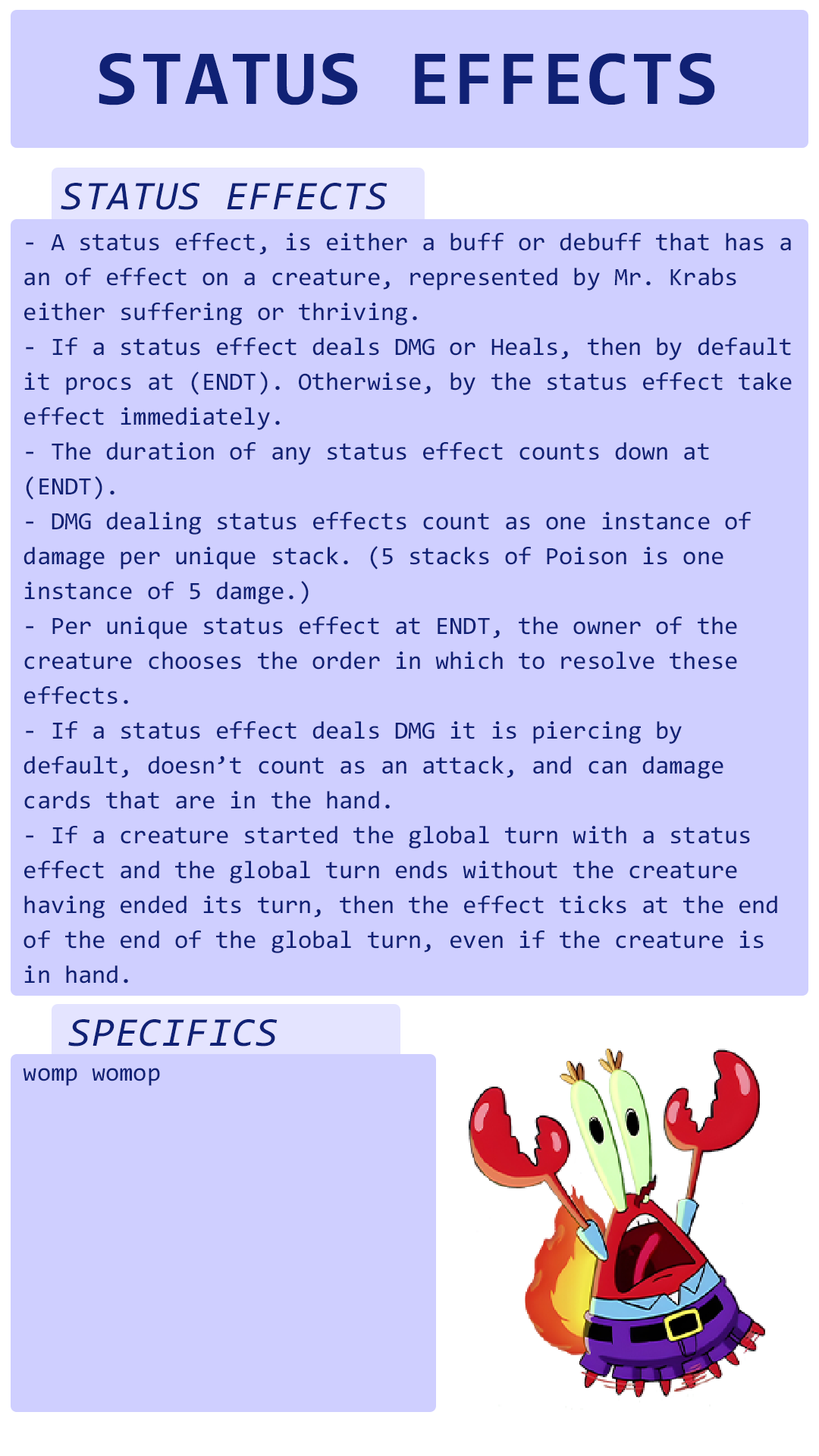
<style>
.page{position:relative;width:819px;height:1456px;background:#cfcfff}
.page>*{position:absolute;margin:0}
.t1{font:78.3px "Consolas-Bold";letter-spacing:0.02em;color:#102175}
.t2{font:41.1px "Consolas-Italic";letter-spacing:0.02em;color:#102175}
.t3{font:25px/34.9px "Consolas";color:#102175}
.t4{font:25px "Consolas";color:#102175}
</style>
<div class="page">
<p class="t1" style="left:99px;top:53px;width:616px;height:52px">STATUS EFFECTS</p>
<p class="t2" style="left:61px;top:183px;width:327px;height:27px">STATUS EFFECTS</p>
<p class="t3" style="left:24px;top:233px;width:768px;height:751px">- A status effect, is either a buff or debuff that has a an of effect on a creature, represented by Mr. Krabs either suffering or thriving.<br>- If a status effect deals DMG or Heals, then by default it procs at (ENDT). Otherwise, by the status effect take effect immediately.<br>- The duration of any status effect counts down at (ENDT).<br>- DMG dealing status effects count as one instance of damage per unique stack. (5 stacks of Poison is one instance of 5 damge.)<br>- Per unique status effect at ENDT, the owner of the creature chooses the order in which to resolve these effects.<br>- If a status effect deals DMG it is piercing by default, doesn’t count as an attack, and can damage cards that are in the hand.<br>- If a creature started the global turn with a status effect and the global turn ends without the creature having ended its turn, then the effect ticks at the end of the end of the global turn, even if the creature is in hand.</p>
<p class="t2" style="left:68px;top:1019px;width:210px;height:27px">SPECIFICS</p>
<p class="t4" style="left:23px;top:1068px;width:137px;height:18px">womp womop</p>
</div>
